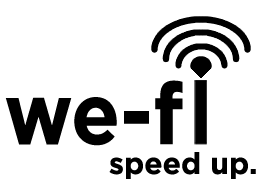
<style>
.page{position:relative;width:260px;height:180px;background:#ffffff}
.page>*{position:absolute;margin:0}
.t1{font:86px "Gotham-Bold";color:#000000;scale:0.93 1}
.t2{font:30px "Gotham-Bold";color:#000000}
</style>
<div class="page">
<p class="t1" style="left:5px;top:80px;width:178px;height:66px">we-f</p>
<p class="t2" style="left:109px;top:152px;width:147px;height:27px">speed up.</p>
</div>
